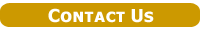
<style>
.page{position:relative;width:200px;height:30px;background:#cc9900}
.page>*{position:absolute;margin:0}
.t1{font:17.9px "TahomaSmallCap-Bold";color:#ffffff}
</style>
<div class="page">
<p class="t1" style="left:48px;top:8px;width:106px;height:15px">Contact Us</p>
</div>
